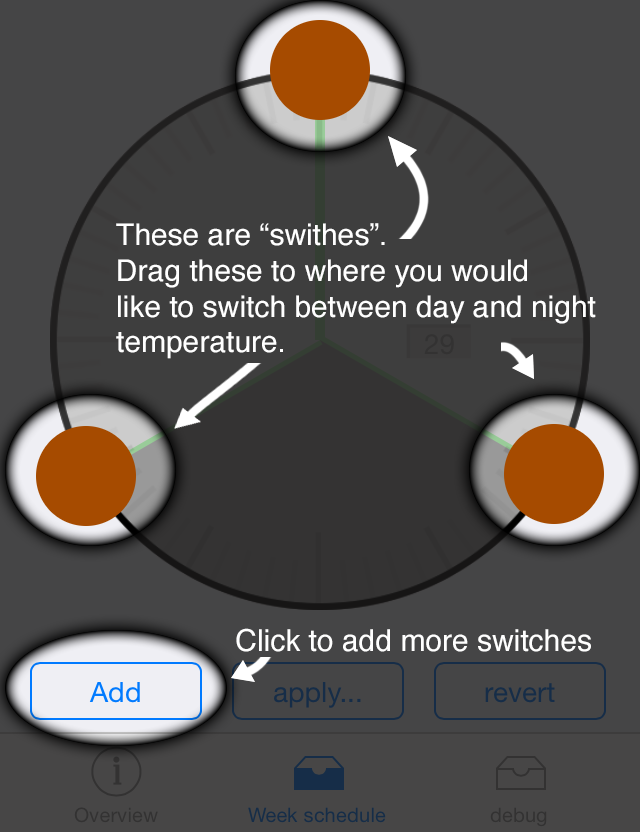
<style>
.page{position:relative;width:640px;height:832px;background:#454546}
.page>*{position:absolute;margin:0}
.t1{font:29.9px "Helvetica";color:#ffffff}
.t2{font:30px "Helvetica";color:#ffffff}
</style>
<div class="page">
<p class="t1" style="left:116px;top:223px;width:480px;height:136px">These are “swithes”.<br>Drag these to where you would<br>like to switch between day and night<br>temperature.</p>
<p class="t2" style="left:236px;top:628px;width:355px;height:24px">Click to add more switches</p>
</div>
